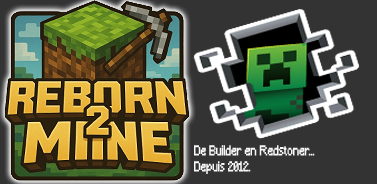
<style>
.page{position:relative;width:377px;height:184px;background:#333333}
.page>*{position:absolute;margin:0}
.t1{font:13.3px/16px "Minecraft";color:#ffffff;scale:0.74 1}
.t2{font:21.3px/16px "MINECRAFTPE";color:#000000;scale:0.74 1}
</style>
<div class="page">
<p class="t1" style="left:194px;top:145px;width:121px;height:29px;opacity:0.97"><span class="t2"><br><br></span>De Builder en Redstoner...<br>Depuis 2012.</p>
</div>
